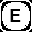
<style>
.page{position:relative;width:32px;height:32px;background:#ffffff}
.page>*{position:absolute;margin:0}
.t1{font:18px "Helvetica-Bold";color:#000000}
</style>
<div class="page">
<p class="t1" style="left:10px;top:9px;width:11px;height:13px">E</p>
</div>
